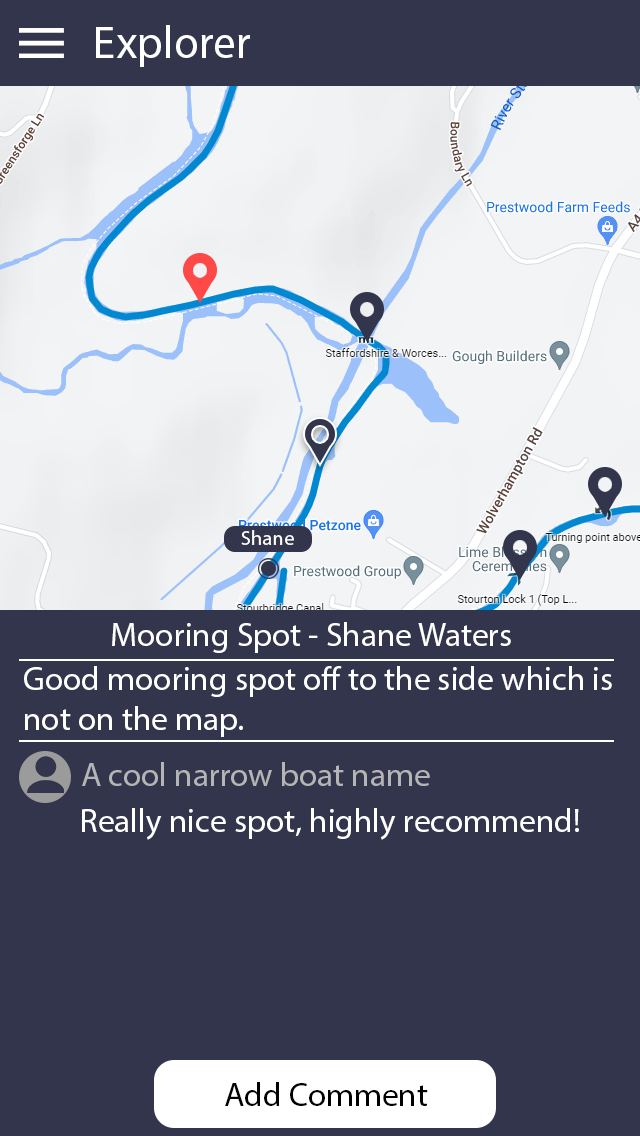
<style>
.page{position:relative;width:640px;height:1136px;background:#32354c}
.page>*{position:absolute;margin:0}
.t1{font:45.8px "MyriadPro-Regular";color:#ffffff}
.t2{font:20.8px "MyriadPro-Regular";color:#ffffff}
.t3{font:33.3px "MyriadPro-Regular";color:#ffffff}
.t4{font:33.3px "MyriadPro-Regular";color:#b5b5b5}
.t5{font:33.3px "MyriadPro-Regular";color:#000000}
</style>
<div class="page">
<p class="t1" style="left:96px;top:25px;width:154px;height:42px">Explorer</p>
<p class="t2" style="left:241px;top:530px;width:53px;height:15px">Shane</p>
<p class="t3" style="left:112px;top:622px;width:399px;height:31px">Mooring Spot - Shane Waters</p>
<p class="t3" style="left:24px;top:666px;width:588px;height:71px">Good mooring spot off to the side which is not on the map.</p>
<p class="t4" style="left:82px;top:762px;width:348px;height:24px">A cool narrow boat name</p>
<p class="t3" style="left:82px;top:808px;width:497px;height:32px">Really nice spot, highly recommend!</p>
<p class="t5" style="left:225px;top:1082px;width:203px;height:24px">Add Comment</p>
</div>
